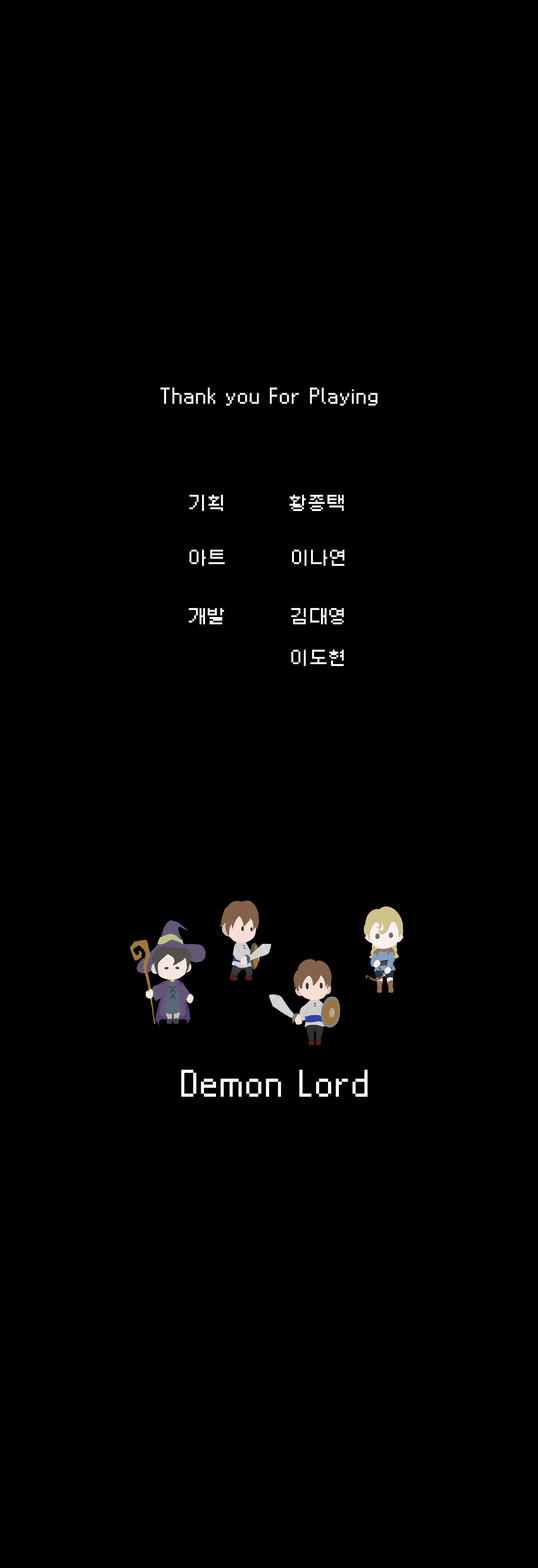
<style>
.page{position:relative;width:538px;height:1568px;background:#000000}
.page>*{position:absolute;margin:0}
.t1{font:17.9px "Galmuri9-Regular";letter-spacing:0.06em;color:#ffffff}
.t2{font:29.8px "Galmuri9-Regular";letter-spacing:0.06em;color:#ffffff}
</style>
<div class="page">
<p class="t1" style="left:189px;top:495px;width:34px;height:16px">기획</p>
<p class="t1" style="left:289px;top:495px;width:55px;height:16px">황종택</p>
<p class="t1" style="left:189px;top:550px;width:36px;height:16px">아트</p>
<p class="t1" style="left:292px;top:550px;width:52px;height:16px">이나연</p>
<p class="t1" style="left:188px;top:608px;width:36px;height:16px">개발</p>
<p class="t1" style="left:291px;top:608px;width:53px;height:16px">김대영</p>
<p class="t1" style="left:291px;top:650px;width:53px;height:16px">이도현</p>
<p class="t2" style="left:181px;top:1070px;width:186px;height:27px">Demon Lord</p>
</div>
